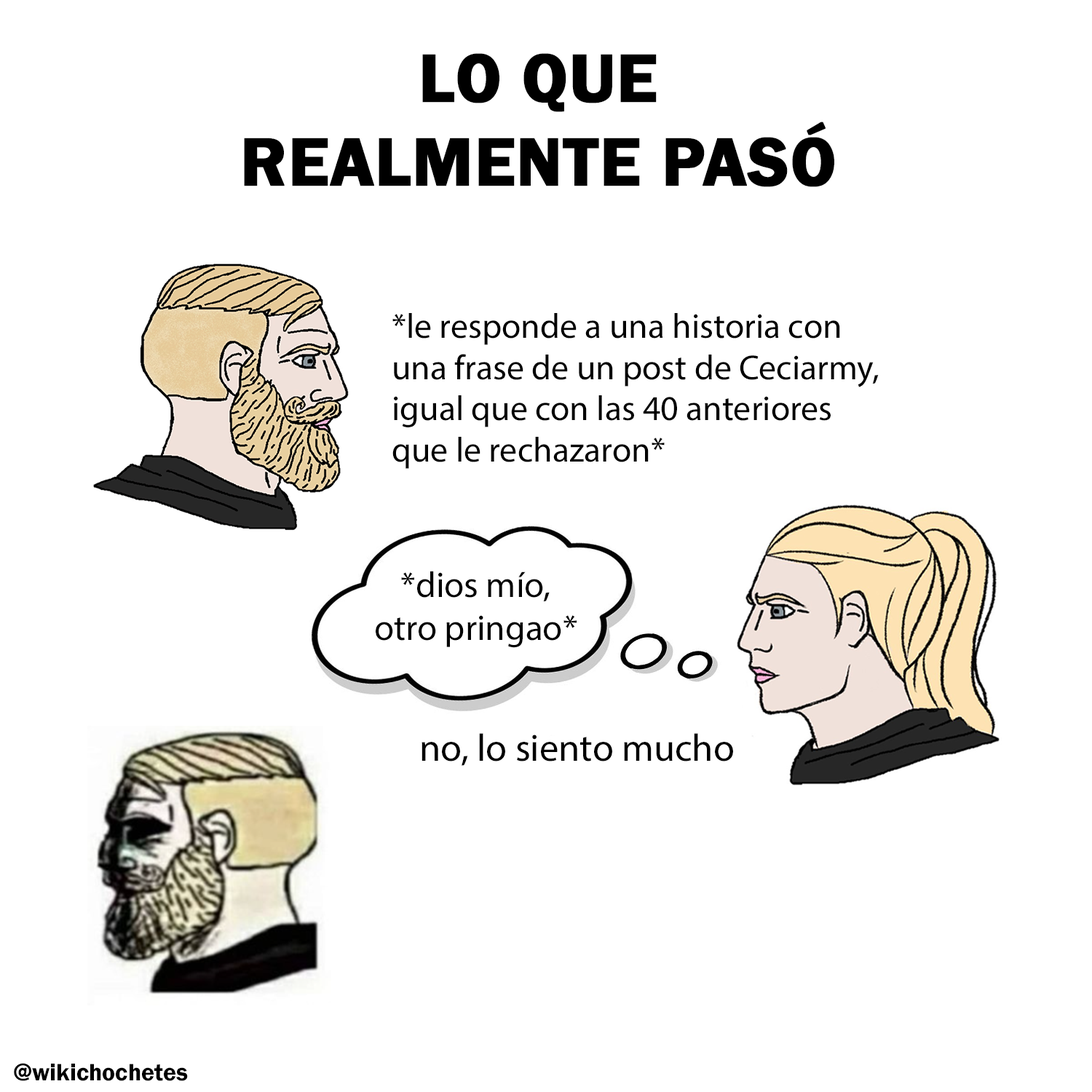
<style>
.page{position:relative;width:1092px;height:1092px;background:#ffffff}
.page>*{position:absolute;margin:0}
.t1{font:70.3px "FranklinGothic-Demi";color:#000000;font-weight:bold}
.t2{font:34.9px "MyriadPro-Regular";color:#000000}
.t3{font:36px "MyriadPro-Regular";color:#000000}
.t4{font:38.4px "MyriadPro-Regular";color:#000000}
.t5{font:24.5px "FranklinGothic-Demi";color:#000000}
</style>
<div class="page">
<p class="t1" style="left:244px;top:53px;width:590px;height:134px;text-align:center">LO QUE<br>REALMENTE PASÓ</p>
<p class="t2" style="left:392px;top:313px;width:487px;height:156px">*le responde a una historia con<br>una frase de un post de Ceciarmy,<br>igual que con las 40 anteriores<br>que le rechazaron*</p>
<p class="t3" style="left:376px;top:571px;width:201px;height:77px;text-align:center">*dios mío,<br>otro pringao*</p>
<p class="t4" style="left:422px;top:733px;width:311px;height:33px">no, lo siento mucho</p>
<p class="t5" style="left:14px;top:1063px;width:174px;height:18px">@wikichochetes</p>
</div>
